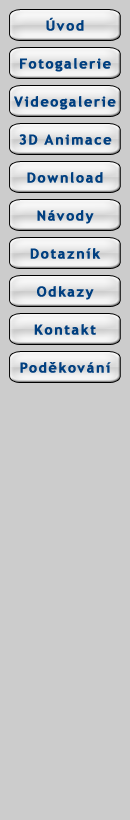
<style>
.page{position:relative;width:130px;height:820px;background:#cccccc}
.page>*{position:absolute;margin:0}
.t1{font:14px/19px "TrebuchetMS-Bold";letter-spacing:0.1em;color:#003f80;font-weight:bold}
</style>
<div class="page">
<p class="t1" style="left:14px;top:17px;width:102px;height:356px;text-align:center">Úvod<br><br>Fotogalerie<br><br>Videogalerie<br><br>3D Animace<br><br>Download<br><br>Návody<br><br>Dotazník<br><br>Odkazy<br><br>Kontakt<br><br>Poděkování</p>
</div>
